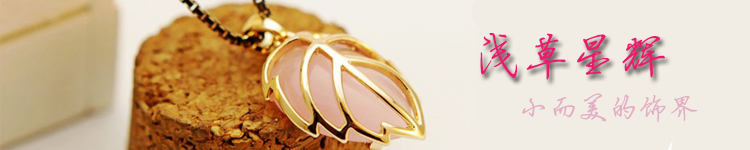
<style>
.page{position:relative;width:750px;height:150px;background:#f1ede4}
.page>*{position:absolute;margin:0}
.t1{font:48px "Jyinbixinsu";color:#ea1b6e}
.t2{font:30px "Jyinbixinsu";color:#e4adc3}
</style>
<div class="page">
<p class="t1" style="left:480px;top:33px;width:185px;height:47px">浅草星辉</p>
<p class="t2" style="left:522px;top:93px;width:176px;height:30px">小而美的饰界</p>
</div>
